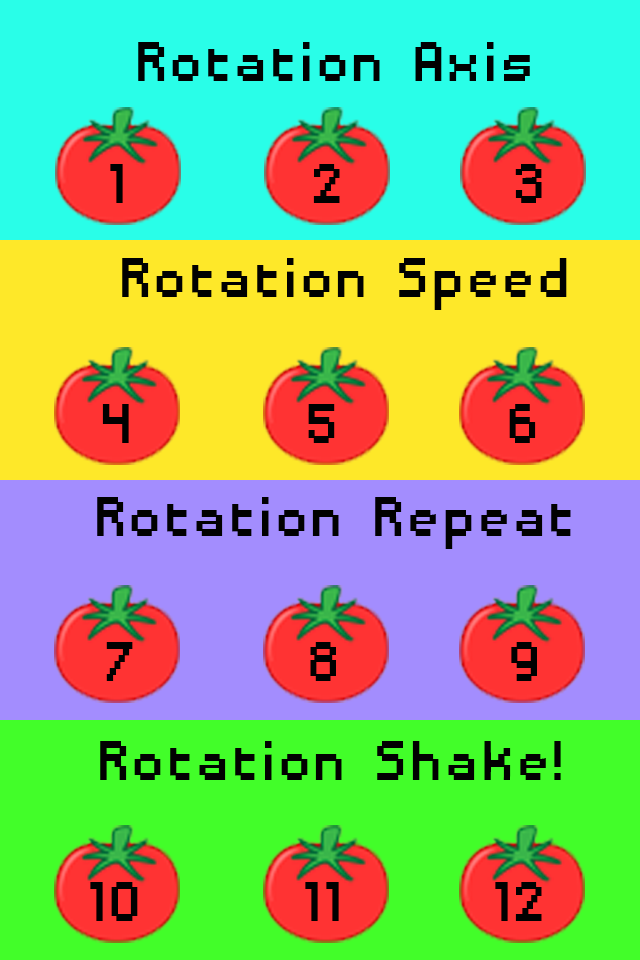
<style>
.page{position:relative;width:640px;height:960px}
.page>*{position:absolute;margin:0}
.t1{font:72.6px "DisposableDroidBB";color:#010101}
</style>
<div class="page">
<p class="t1" style="left:138px;top:42px;width:392px;height:39px">Rotation Axis</p>
<p class="t1" style="left:110px;top:164px;width:13px;height:39px">1</p>
<p class="t1" style="left:313px;top:164px;width:27px;height:39px">2</p>
<p class="t1" style="left:515px;top:164px;width:27px;height:39px">3</p>
<p class="t1" style="left:122px;top:258px;width:445px;height:52px">Rotation Speed</p>
<p class="t1" style="left:102px;top:404px;width:27px;height:39px">4</p>
<p class="t1" style="left:308px;top:404px;width:27px;height:39px">5</p>
<p class="t1" style="left:509px;top:404px;width:27px;height:39px">6</p>
<p class="t1" style="left:97px;top:497px;width:474px;height:52px">Rotation Repeat</p>
<p class="t1" style="left:106px;top:642px;width:27px;height:39px">7</p>
<p class="t1" style="left:310px;top:642px;width:26px;height:39px">8</p>
<p class="t1" style="left:511px;top:642px;width:26px;height:39px">9</p>
<p class="t1" style="left:100px;top:741px;width:461px;height:39px">Rotation Shake!</p>
<p class="t1" style="left:90px;top:882px;width:48px;height:39px">10</p>
<p class="t1" style="left:305px;top:882px;width:34px;height:39px">11</p>
<p class="t1" style="left:495px;top:882px;width:47px;height:39px">12</p>
</div>
